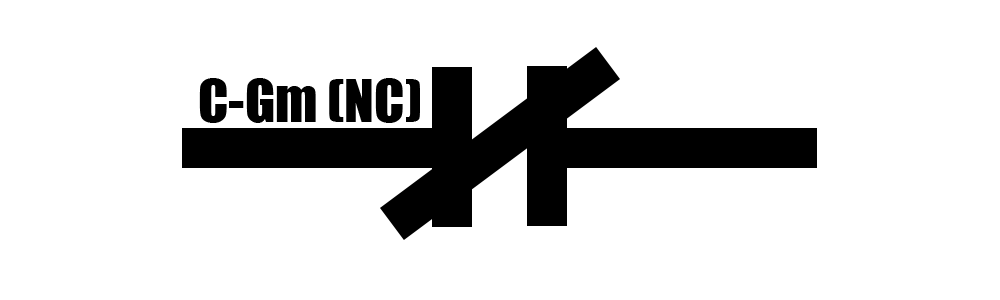
<style>
.page{position:relative;width:1000px;height:300px;background:#ffffff}
.page>*{position:absolute;margin:0}
.t1{font:55px "Impact";color:#000000}
</style>
<div class="page">
<p class="t1" style="left:199px;top:78px;width:221px;height:45px">C-Gm (NC)</p>
</div>
